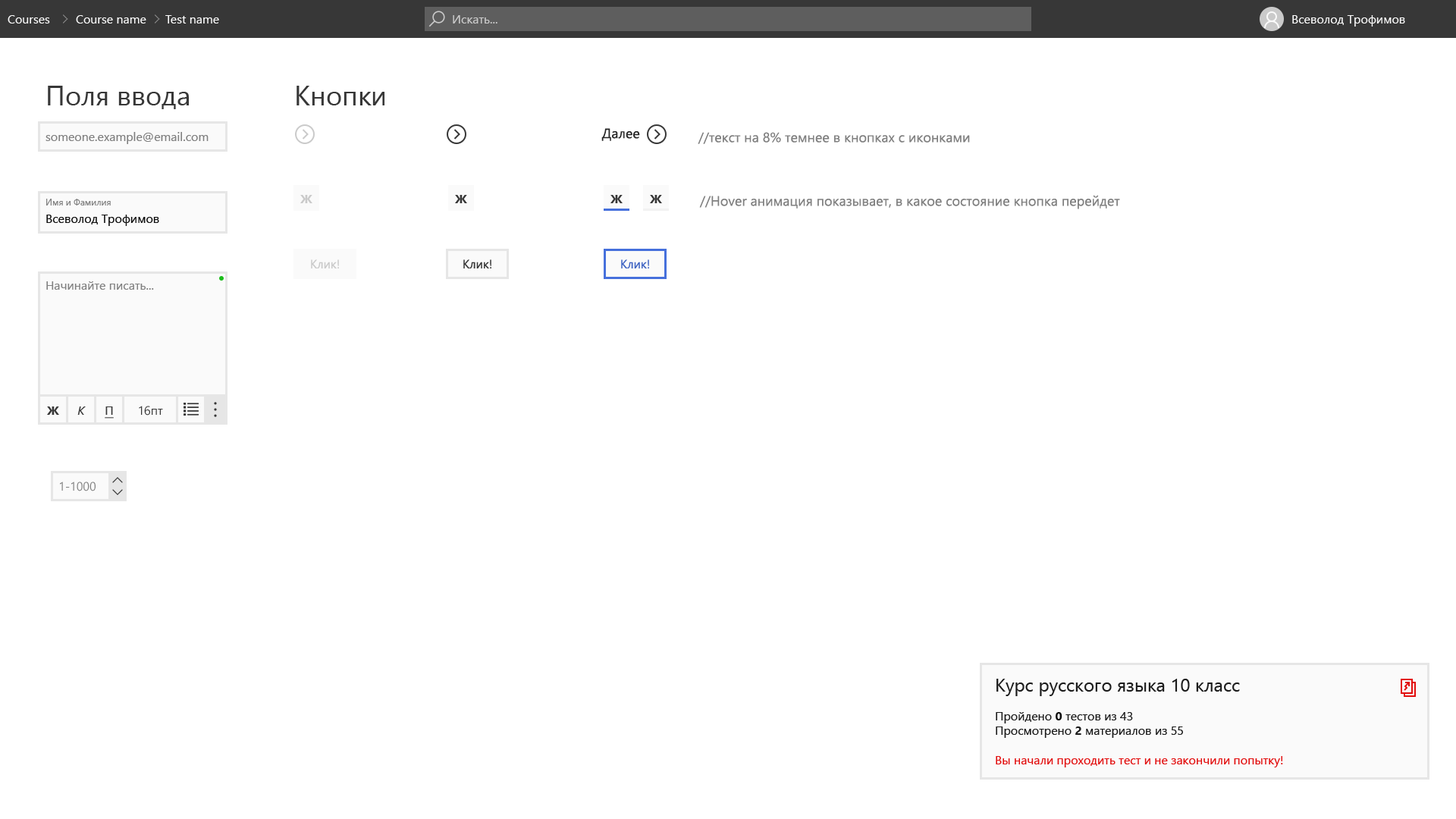
<style>
.page{position:relative;width:1456px;height:819px;background:#ffffff}
.page>*{position:absolute;margin:0}
.t1{font:12.1px "SegoeUI";color:#fafafa}
.t2{font:12.1px "SegoeUI";color:#cacaca}
.t3{font:27.3px "SegoeUI";color:#373737}
.t4{font:12.1px "SegoeUI";color:#808080}
.t5{font:13.6px "SegoeUI";color:#242424}
.t6{font:13.6px "SegoeUI";color:#808080}
.t7{font:12.1px "SegoeUI-Bold";color:#cacaca}
.t8{font:12.1px "SegoeUI-Bold";color:#373737}
.t9{font:9.1px "SegoeUI";color:#808080}
.t10{font:12.1px "SegoeUI";color:#0f0f0f}
.t11{font:12.1px "SegoeUI";color:#373737}
.t12{font:12.1px "SegoeUI";color:#3e63c2}
.t13{font:12.1px "SegoeUI-Italic";color:#373737}
.t14{font:12.1px "SegoeUI";color:#373737;text-decoration:underline}
.t15{font:12.1px "SegoeUI";color:#e20e0e}
.t16{font:18.2px "SegoeUI";color:#1b1b1b}
.t17{font:12.1px "SegoeUI";color:#1b1b1b}
.t18{font:12.1px "SegoeUI-Bold";color:#0f0f0f}
.t19{font:12.1px "SegoeUI-Bold";color:#1b1b1b}
</style>
<div class="page">
<p class="t1" style="left:8px;top:15px;width:42px;height:9px">Courses</p>
<p class="t1" style="left:76px;top:15px;width:70px;height:9px">Course name</p>
<p class="t1" style="left:165px;top:15px;width:54px;height:9px">Test name</p>
<p class="t2" style="left:453px;top:15px;width:44px;height:9px">Искать...</p>
<p class="t1" style="left:1292px;top:15px;width:113px;height:12px">Всеволод Трофимов</p>
<p class="t3" style="left:48px;top:86px;width:141px;height:23px">Поля ввода</p>
<p class="t3" style="left:297px;top:86px;width:87px;height:19px">Кнопки</p>
<p class="t4" style="left:45px;top:132px;width:164px;height:12px">someone.example@email.com</p>
<p class="t5" style="left:601px;top:128px;width:39px;height:13px">Далее</p>
<p class="t6" style="left:698px;top:132px;width:272px;height:12px">//текст на 8% темнеe в кнопках с иконками</p>
<p class="t7" style="left:300px;top:195px;width:12px;height:8px">Ж</p>
<p class="t8" style="left:455px;top:195px;width:12px;height:8px">Ж</p>
<p class="t8" style="left:610px;top:195px;width:13px;height:8px">Ж</p>
<p class="t8" style="left:650px;top:195px;width:12px;height:8px">Ж</p>
<p class="t6" style="left:699px;top:195px;width:421px;height:14px">//Hover анимация показывает, в какое состояние кнопка перейдет</p>
<p class="t9" style="left:46px;top:199px;width:65px;height:7px">Имя и Фамилия</p>
<p class="t10" style="left:46px;top:215px;width:113px;height:11px">Всеволод Трофимов</p>
<p class="t2" style="left:311px;top:259px;width:28px;height:9px">Клик!</p>
<p class="t11" style="left:463px;top:259px;width:28px;height:9px">Клик!</p>
<p class="t12" style="left:621px;top:259px;width:28px;height:9px">Клик!</p>
<p class="t4" style="left:46px;top:281px;width:108px;height:9px">Начинайте писать...</p>
<p class="t8" style="left:47px;top:406px;width:12px;height:9px">Ж</p>
<p class="t13" style="left:77px;top:406px;width:9px;height:9px">К</p>
<p class="t14" style="left:105px;top:406px;width:9px;height:13px">П</p>
<p class="t11" style="left:139px;top:406px;width:24px;height:10px">16пт</p>
<p class="t4" style="left:60px;top:482px;width:36px;height:9px">1-1000</p>
<p class="t15" style="left:996px;top:679px;width:287px;height:88px"><span class="t16">Курс русского языка 10 класс<br></span><span class="t17"><br>Пройдено </span><span class="t18">0</span><span class="t17"> тестов из 43<br>Просмотрено </span><span class="t19">2</span><span class="t17"> материалов из 55<br><br></span>Вы начали проходить тест и не закончили попытку!</p>
</div>
